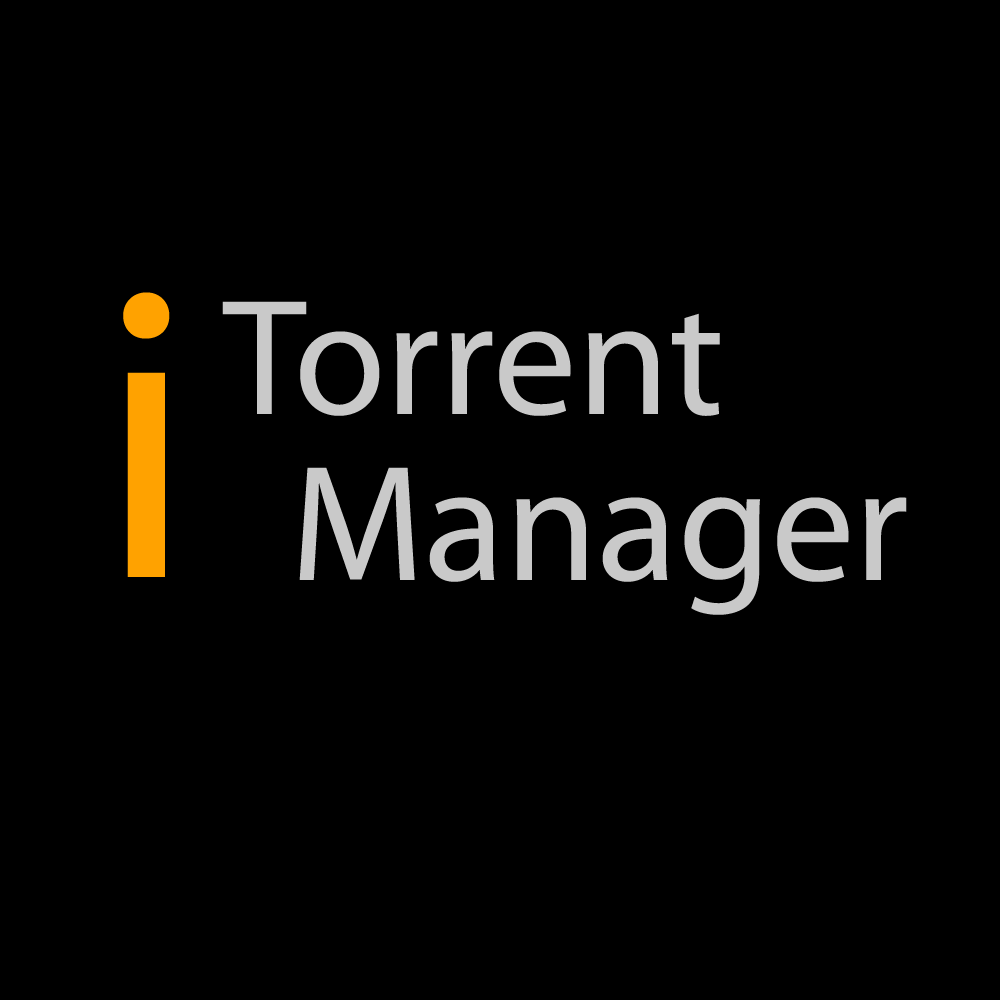
<style>
.page{position:relative;width:1000px;height:1000px;background:#000000}
.page>*{position:absolute;margin:0}
.t1{font:422.1px "MyriadPro-Regular";color:#ffa200}
.t2{font:166.7px "MyriadPro-Regular";color:#c9c9c9}
</style>
<div class="page">
<p class="t1" style="left:123px;top:292px;width:47px;height:285px">i</p>
<p class="t2" style="left:222px;top:301px;width:498px;height:115px">Torrent</p>
<p class="t2" style="left:299px;top:467px;width:608px;height:148px">Manager</p>
</div>
